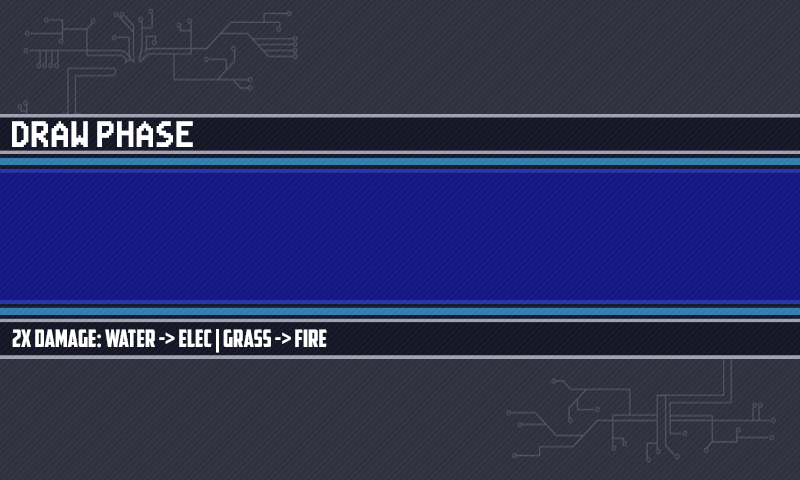
<style>
.page{position:relative;width:800px;height:480px}
.page>*{position:absolute;margin:0}
.t1{font:18.7px "Mega-Man-Battle-Network";color:#ffffff}
.t2{font:24px "AmericanCaptain";color:#ffffff}
</style>
<div class="page">
<p class="t1" style="left:12px;top:121px;width:181px;height:26px">Draw phase</p>
<p class="t2" style="left:12px;top:329px;width:315px;height:24px">2x Damage: water -&gt; elec | grass -&gt; fire</p>
</div>
